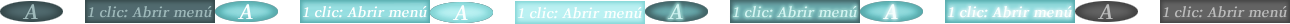
<style>
.page{position:relative;width:1290px;height:24px;background:#ffffff}
.page>*{position:absolute;margin:0}
.t1{font:24px "OfficialFateFont-Medium";color:#9eb9ba;font-weight:bold;font-style:italic}
.t2{font:16px "OfficialFateFont-Medium";color:#9eb9ba;font-weight:bold;font-style:italic}
.t3{font:24px "OfficialFateFont-Medium";color:#fafefe;font-weight:bold;font-style:italic}
.t4{font:16px "OfficialFateFont-Medium";color:#fcfffe;font-weight:bold;font-style:italic}
.t5{font:24px "OfficialFateFont-Medium";color:#cff2ef;font-weight:bold;font-style:italic}
.t6{font:16px "OfficialFateFont-Medium";color:#d4f4f1;font-weight:bold;font-style:italic}
.t7{font:24px "OfficialFateFont-Medium";color:#f5fefd;font-weight:bold;font-style:italic}
.t8{font:24px "OfficialFateFont-Medium";color:#bbbbbb;font-weight:bold;font-style:italic}
.t9{font:16px "OfficialFateFont-Medium";color:#bbbbbb;font-weight:bold;font-style:italic}
</style>
<div class="page">
<p class="t1" style="left:22px;top:4px;width:16px;height:15px">A</p>
<p class="t2" style="left:87px;top:5px;width:125px;height:13px">1 clic: Abrir menú</p>
<p class="t3" style="left:237px;top:4px;width:16px;height:15px">A</p>
<p class="t4" style="left:302px;top:5px;width:125px;height:13px">1 clic: Abrir menú</p>
<p class="t3" style="left:452px;top:5px;width:16px;height:15px">A</p>
<p class="t4" style="left:517px;top:6px;width:125px;height:13px">1 clic: Abrir menú</p>
<p class="t5" style="left:667px;top:4px;width:16px;height:15px">A</p>
<p class="t6" style="left:732px;top:5px;width:125px;height:13px">1 clic: Abrir menú</p>
<p class="t7" style="left:882px;top:4px;width:16px;height:15px">A</p>
<p class="t4" style="left:947px;top:5px;width:125px;height:13px">1 clic: Abrir menú</p>
<p class="t8" style="left:1097px;top:4px;width:16px;height:15px">A</p>
<p class="t9" style="left:1162px;top:5px;width:125px;height:13px">1 clic: Abrir menú</p>
</div>
